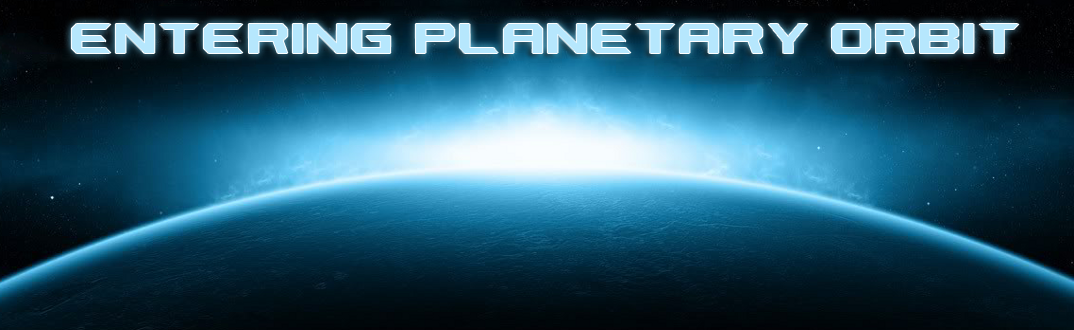
<style>
.page{position:relative;width:1074px;height:330px}
.page>*{position:absolute;margin:0}
.t1{font:48px "AeromaticsNC";color:#b6e7fd}
</style>
<div class="page">
<p class="t1" style="left:71px;top:24px;width:948px;height:29px">Entering planetary orbit</p>
</div>
